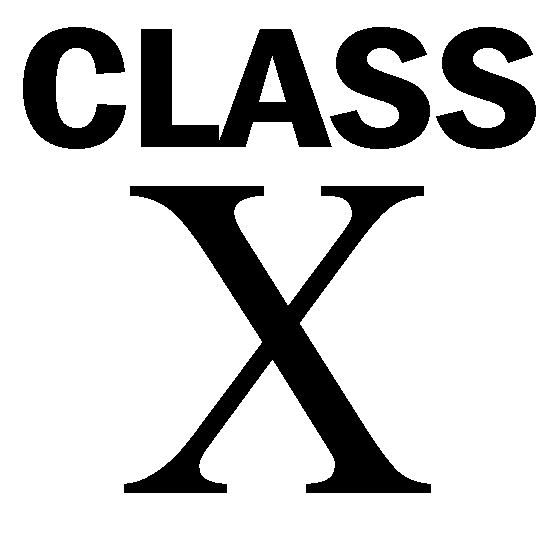
<style>
.page{position:relative;width:554px;height:554px;background:#ffffff}
.page>*{position:absolute;margin:0}
.t1{font:176.6px "FranklinGothic-DemiCond";color:#000000;scale:1.21 1}
.t2{font:461.7px "MongolianBaiti";color:#000000;scale:0.94 1}
</style>
<div class="page">
<p class="t1" style="left:23px;top:27px;width:513px;height:122px">CLASS</p>
<p class="t2" style="left:124px;top:186px;width:307px;height:307px">X</p>
</div>
